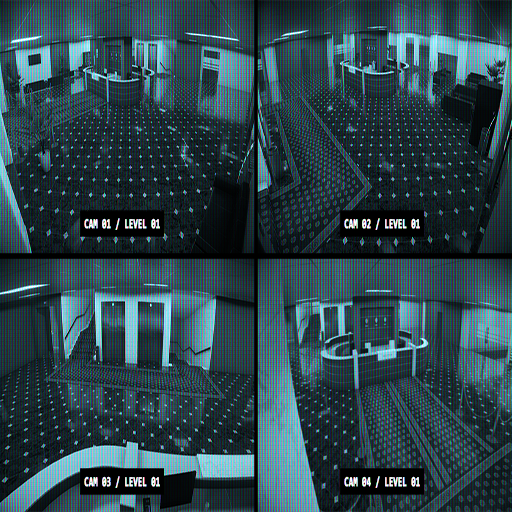
<style>
.page{position:relative;width:512px;height:512px}
.page>*{position:absolute;margin:0}
.t1{font:13.7px "Consolas-Bold";color:#ffffff;font-weight:bold;scale:0.56 1}
</style>
<div class="page">
<p class="t1" style="left:84px;top:218px;width:76px;height:12px">CAM 01 / LEVEL 01</p>
<p class="t1" style="left:344px;top:218px;width:76px;height:12px">CAM 02 / LEVEL 01</p>
<p class="t1" style="left:84px;top:476px;width:76px;height:12px">CAM 03 / LEVEL 01</p>
<p class="t1" style="left:344px;top:476px;width:76px;height:12px">CAM 04 / LEVEL 01</p>
</div>
